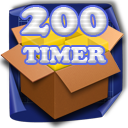
<style>
.page{position:relative;width:128px;height:128px}
.page>*{position:absolute;margin:0}
.t1{font:24px "CooperBlack"}
.t2{font:48px "CooperBlack"}
</style>
<div class="page">
<p class="t1" style="left:21px;top:7px;width:86px;height:56px;text-align:center"><span class="t2">200<br></span>TIMER</p>
</div>
